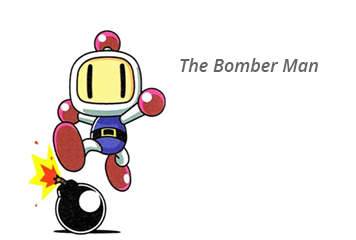
<style>
.page{position:relative;width:356px;height:240px;background:#ffffff}
.page>*{position:absolute;margin:0}
.t1{font:18px "OpenSans-SemiboldItalic";color:#656565}
</style>
<div class="page">
<p class="t1" style="left:180px;top:58px;width:138px;height:14px">The Bomber Man</p>
</div>
